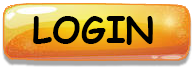
<style>
.page{position:relative;width:193px;height:67px}
.page>*{position:absolute;margin:0}
.t1{font:36px "ComicSansMS-Bold";color:#000000}
</style>
<div class="page">
<p class="t1" style="left:33px;top:16px;width:120px;height:29px">LOGIN</p>
</div>
